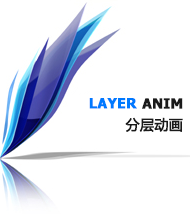
<style>
.page{position:relative;width:190px;height:214px;background:#ffffff}
.page>*{position:absolute;margin:0}
.t1{font:14px "Tahoma-Bold";color:#0079ff;text-transform:uppercase;font-weight:bold}
.t2{font:14px "Tahoma-Bold";color:#1a1a1a;text-transform:uppercase;font-weight:bold}
.t3{font:14px "MicrosoftYaHei";color:#1a1a1a;text-transform:uppercase;font-weight:bold}
</style>
<div class="page">
<p class="t1" style="left:89px;top:98px;width:48px;height:11px">Layer</p>
<p class="t2" style="left:142px;top:98px;width:41px;height:11px">Anim</p>
<p class="t3" style="left:125px;top:117px;width:58px;height:15px">分层动画</p>
</div>
